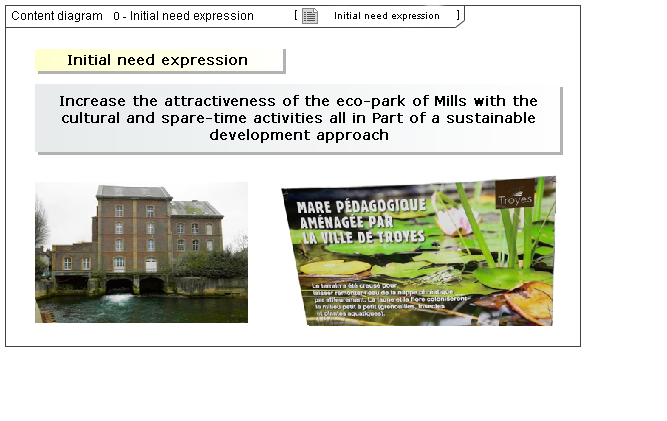
<style>
.page{position:relative;width:667px;height:421px;background:#ffffff}
.page>*{position:absolute;margin:0}
.t1{font:12px "ArialMT";color:#000000}
.t2{font:10px "ArialMT";color:#000000}
.t3{font:14px "Verdana";color:#000000;font-weight:bold}
</style>
<div class="page">
<p class="t1" style="left:12px;top:11px;width:90px;height:11px">Content diagram</p>
<p class="t1" style="left:131px;top:11px;width:122px;height:11px">Initial need expression</p>
<p class="t2" style="left:335px;top:12px;width:104px;height:9px">Initial need expression</p>
<p class="t3" style="left:68px;top:54px;width:179px;height:14px">Initial need expression</p>
<p class="t3" style="left:60px;top:95px;width:477px;height:48px;text-align:center">Increase the attractiveness of the eco-park of Mills with the cultural and spare-time activities all in Part of a sustainable <br>development approach</p>
</div>
